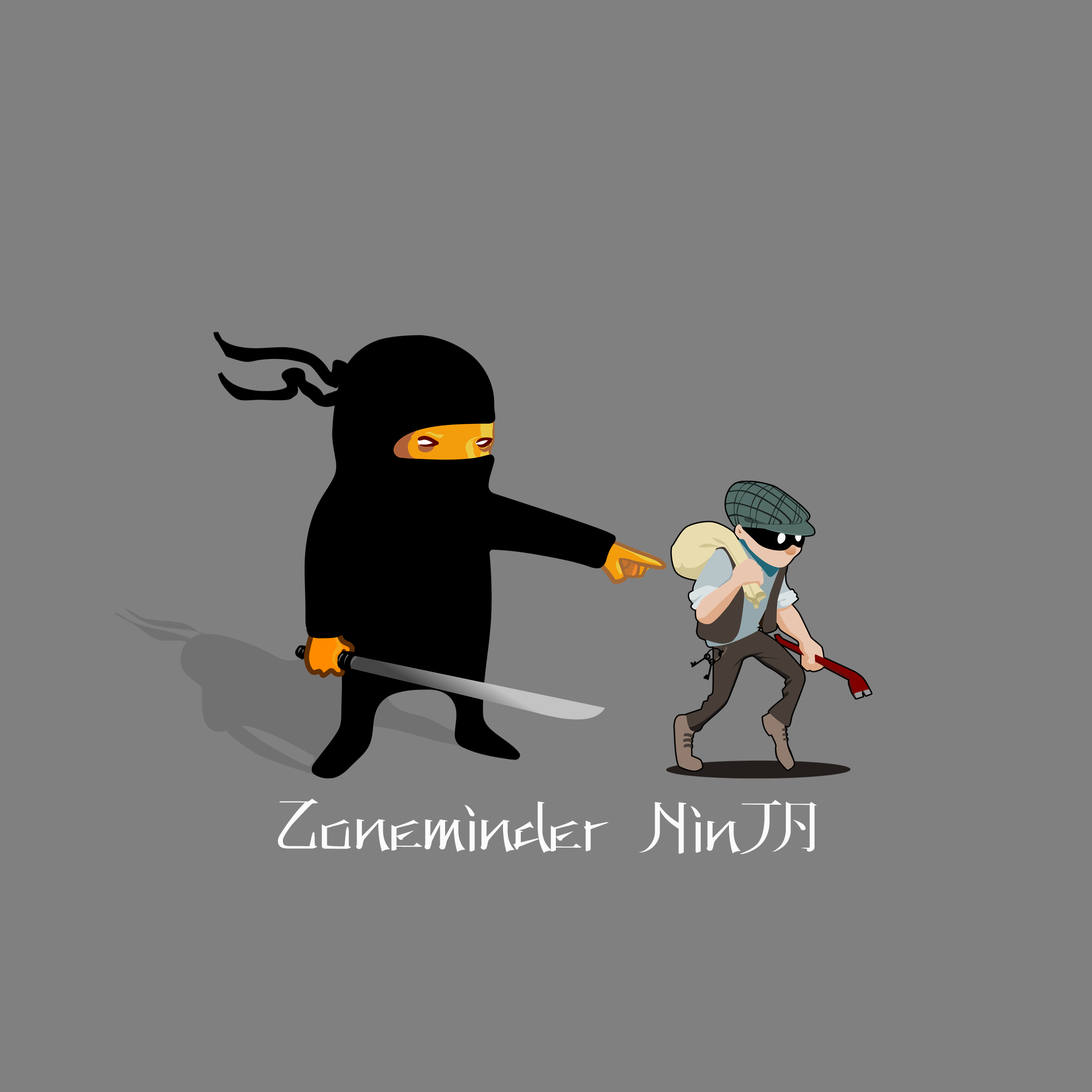
<style>
.page{position:relative;width:1092px;height:1092px;background:#808080}
.page>*{position:absolute;margin:0}
.t1{font:59.3px "KANEIWA-alp-regular";color:#fbfbfb}
</style>
<div class="page">
<p class="t1" style="left:278px;top:799px;width:539px;height:55px">Zoneminder  NinJA</p>
</div>
